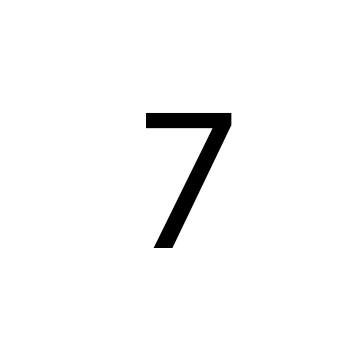
<style>
.page{position:relative;width:354px;height:354px;background:#ffffff}
.page>*{position:absolute;margin:0}
.t1{font:208.3px "MyriadPro-Regular";color:#000000}
</style>
<div class="page">
<p class="t1" style="left:146px;top:112px;width:86px;height:136px">7</p>
</div>
